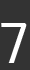
<style>
.page{position:relative;width:30px;height:70px;background:#333333}
.page>*{position:absolute;margin:0}
.t1{font:57px "Exo2-Regular";color:#ffffff}
</style>
<div class="page">
<p class="t1" style="left:1px;top:23px;width:26px;height:40px">7</p>
</div>
